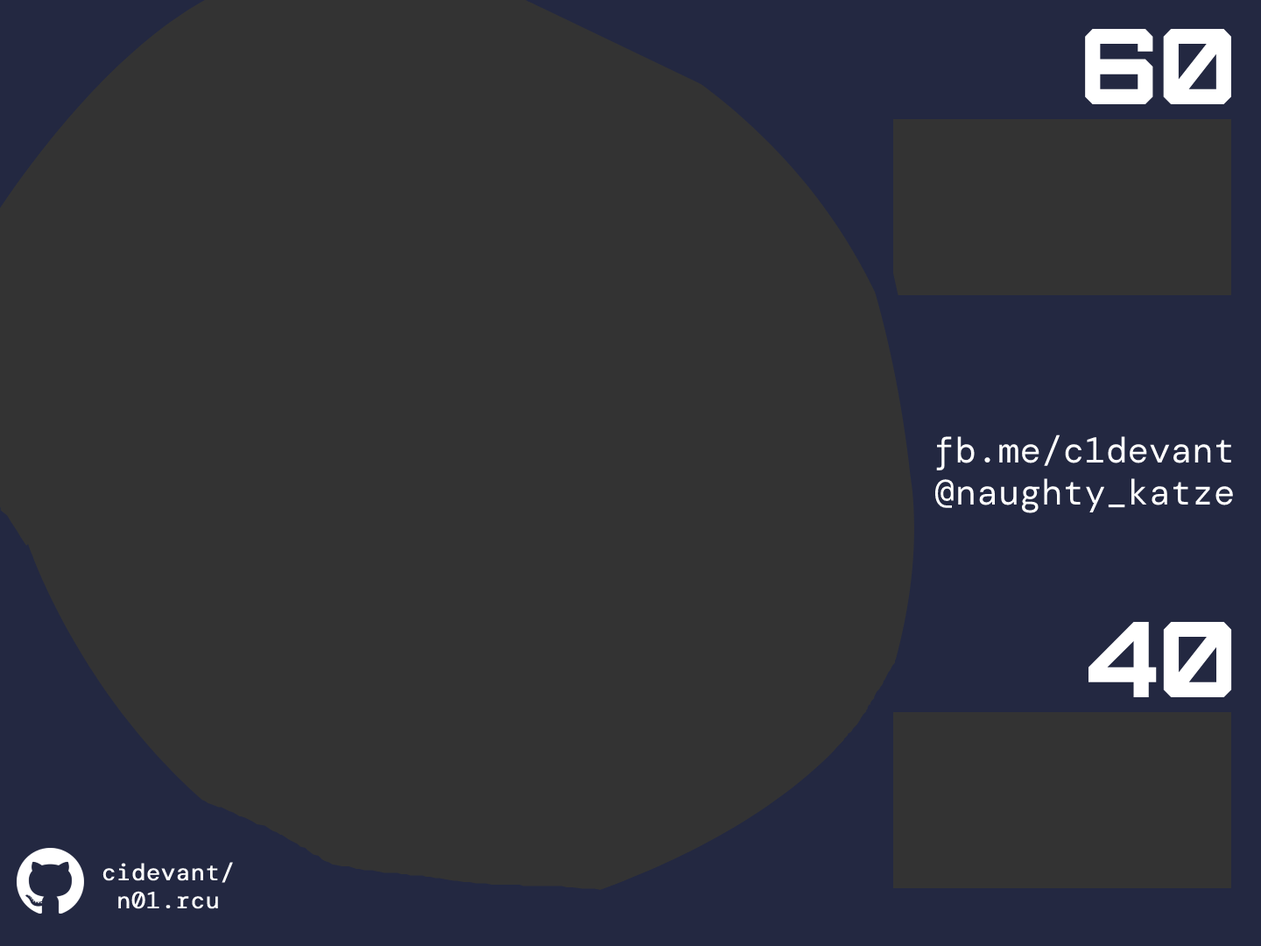
<style>
.page{position:relative;width:1261px;height:946px;background:#333333}
.page>*{position:absolute;margin:0}
.t1{font:107.7px "Furore";color:#ffffff}
.t2{font:35.9px "DMMono-Regular";color:#ffffff}
.t3{font:23.6px "DMMono-Regular";color:#ffffff;font-weight:bold}
</style>
<div class="page">
<p class="t1" style="left:1085px;top:28px;width:146px;height:76px">60</p>
<p class="t2" style="left:936px;top:434px;width:295px;height:37px">fb.me/c1devant</p>
<p class="t2" style="left:934px;top:478px;width:299px;height:35px">@naughty_katze</p>
<p class="t1" style="left:1088px;top:621px;width:144px;height:76px">40</p>
<p class="t3" style="left:102px;top:862px;width:131px;height:47px;text-align:center">cidevant/<br>n01.rcu</p>
</div>
